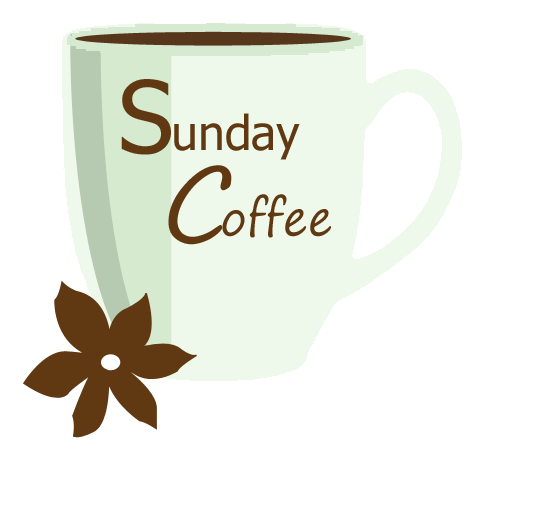
<style>
.page{position:relative;width:548px;height:505px;background:#ffffff}
.page>*{position:absolute;margin:0}
.t1{font:99.6px "Tahoma";color:#603913}
.t2{font:47.8px "Tahoma";color:#603913}
.t3{font:47.8px "SegoePrint";color:#603913}
.t4{font:99.6px "SegoePrint";color:#603913}
</style>
<div class="page">
<p class="t1" style="left:121px;top:79px;width:50px;height:76px">S</p>
<p class="t2" style="left:174px;top:113px;width:126px;height:47px"><span class="t3"> </span>unday</p>
<p class="t4" style="left:168px;top:165px;width:64px;height:80px">C</p>
<p class="t3" style="left:222px;top:194px;width:109px;height:44px">offee</p>
</div>
